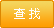
<style>
.page{position:relative;width:54px;height:28px}
.page>*{position:absolute;margin:0}
.t1{font:12px "SimSun";letter-spacing:0.26em;color:#fefefe}
.t2{font:12px "SimSun";color:#fefefe}
</style>
<div class="page">
<p class="t1" style="left:14px;top:8px;width:26px;height:11px">查<span class="t2">找</span></p>
</div>
